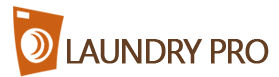
<style>
.page{position:relative;width:279px;height:77px;background:#ffffff}
.page>*{position:absolute;margin:0}
.t1{font:33px "MicrosoftTaiLe";letter-spacing:-0.065em;color:#643e23;text-transform:uppercase;font-weight:bold}
</style>
<div class="page">
<p class="t1" style="left:67px;top:39px;width:202px;height:25px">laundry Pro</p>
</div>
